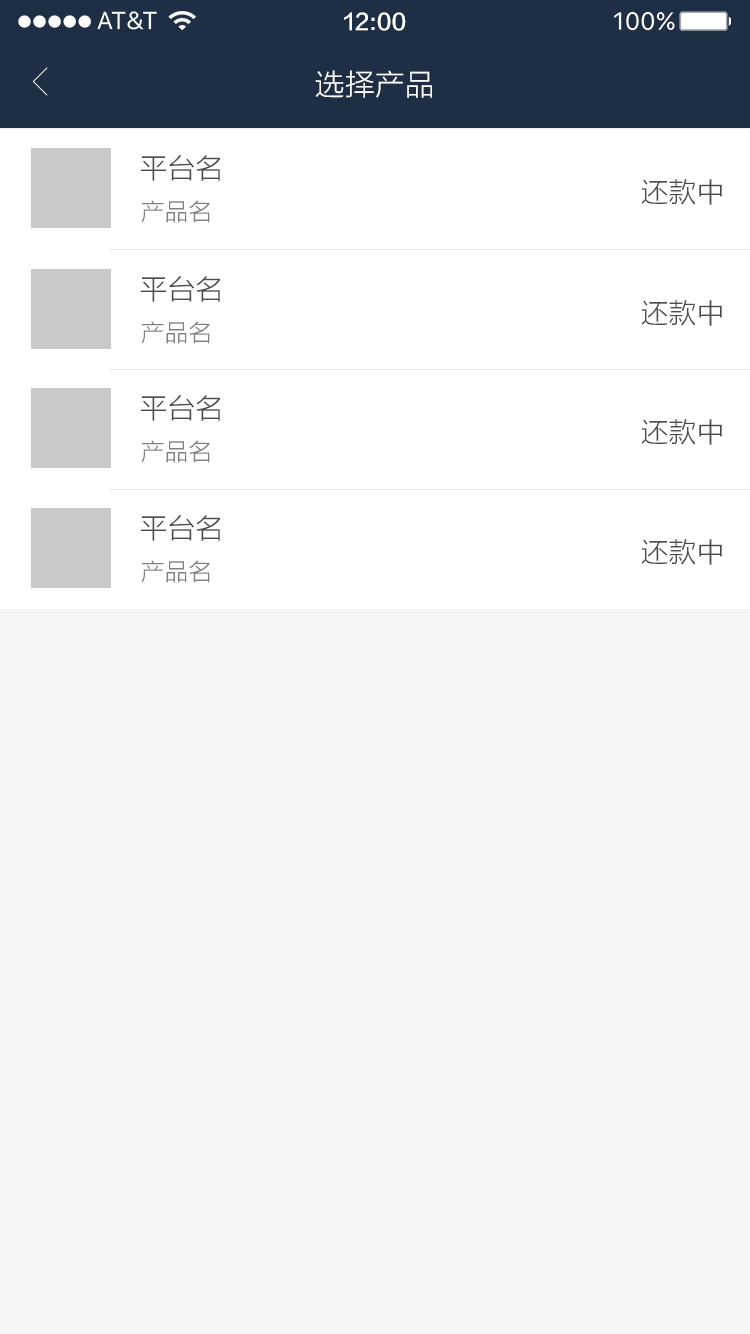
<style>
.page{position:relative;width:750px;height:1334px;background:#f5f5f5}
.page>*{position:absolute;margin:0}
.t1{font:22px "FZLTZHK--GBK1-0";color:#ffffff}
.t2{font:30px "FZLTXHK";color:#ffffff}
.t3{font:28px "FZLTXHK";color:#4d4d4d}
.t4{font:24px "FZLTXHK";color:#808080}
</style>
<div class="page">
<p class="t1" style="left:344px;top:12px;width:62px;height:19px">12:00</p>
<p class="t2" style="left:315px;top:70px;width:117px;height:28px">选择产品</p>
<p class="t3" style="left:140px;top:155px;width:80px;height:26px">平台名</p>
<p class="t3" style="left:641px;top:179px;width:81px;height:26px">还款中</p>
<p class="t4" style="left:141px;top:200px;width:69px;height:23px">产品名</p>
<p class="t3" style="left:140px;top:276px;width:80px;height:26px">平台名</p>
<p class="t3" style="left:641px;top:300px;width:81px;height:26px">还款中</p>
<p class="t4" style="left:141px;top:321px;width:69px;height:23px">产品名</p>
<p class="t3" style="left:140px;top:395px;width:80px;height:26px">平台名</p>
<p class="t3" style="left:641px;top:419px;width:81px;height:26px">还款中</p>
<p class="t4" style="left:141px;top:440px;width:69px;height:23px">产品名</p>
<p class="t3" style="left:140px;top:515px;width:80px;height:26px">平台名</p>
<p class="t3" style="left:641px;top:539px;width:81px;height:26px">还款中</p>
<p class="t4" style="left:141px;top:560px;width:69px;height:23px">产品名</p>
</div>
